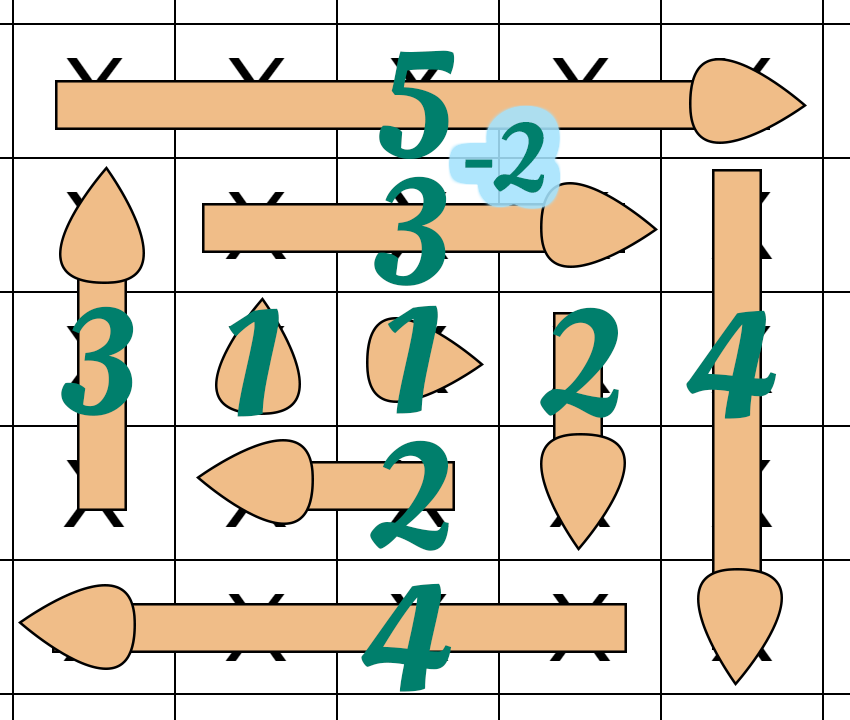
<style>
.page{position:relative;width:850px;height:720px;background:#ffffff}
.page>*{position:absolute;margin:0}
.t1{font:151px "OleoScript-Regular";color:#007f6c}
.t2{font:97.3px "OleoScript-Regular";color:#007f6c}
</style>
<div class="page">
<p class="t1" style="left:379px;top:50px;width:76px;height:109px">5</p>
<p class="t2" style="left:465px;top:122px;width:80px;height:71px">-2</p>
<p class="t1" style="left:374px;top:176px;width:73px;height:110px">3</p>
<p class="t1" style="left:387px;top:305px;width:51px;height:109px">1</p>
<p class="t1" style="left:61px;top:306px;width:73px;height:110px">3</p>
<p class="t1" style="left:228px;top:308px;width:51px;height:109px">1</p>
<p class="t1" style="left:540px;top:307px;width:79px;height:111px">2</p>
<p class="t1" style="left:686px;top:310px;width:91px;height:109px">4</p>
<p class="t1" style="left:370px;top:440px;width:79px;height:111px">2</p>
<p class="t1" style="left:361px;top:583px;width:91px;height:109px">4</p>
</div>
